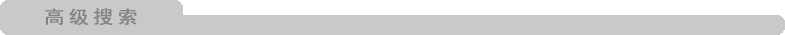
<style>
.page{position:relative;width:785px;height:35px;background:#c9c9ca}
.page>*{position:absolute;margin:0}
.t1{font:18px "SimHei";letter-spacing:0.2em;color:#838384;font-weight:bold;scale:1.11 1}
</style>
<div class="page">
<p class="t1" style="left:45px;top:8px;width:92px;height:18px">高级搜索</p>
</div>
